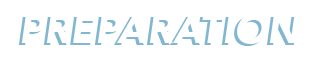
<style>
.page{position:relative;width:320px;height:60px;background:#ffffff}
.page>*{position:absolute;margin:0}
.t1{font:40px "Avenir-BlackOblique"}
.t2{font:40px "Avenir-BlackOblique";color:#ffffff}
</style>
<div class="page">
<p class="t1" style="left:18px;top:16px;width:280px;height:30px">PREPARATION</p>
<p class="t2" style="left:21px;top:14px;width:280px;height:30px">PREPARATION</p>
</div>
